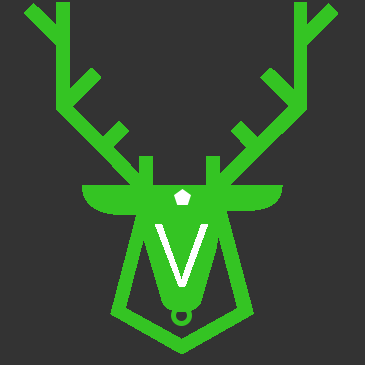
<style>
.page{position:relative;width:365px;height:365px;background:#333333}
.page>*{position:absolute;margin:0}
.t1{font:88.2px "ArialMT";letter-spacing:0.12em;color:#ffffff;scale:0.92 1}
</style>
<div class="page">
<p class="t1" style="left:155px;top:224px;width:53px;height:63px">V</p>
</div>
